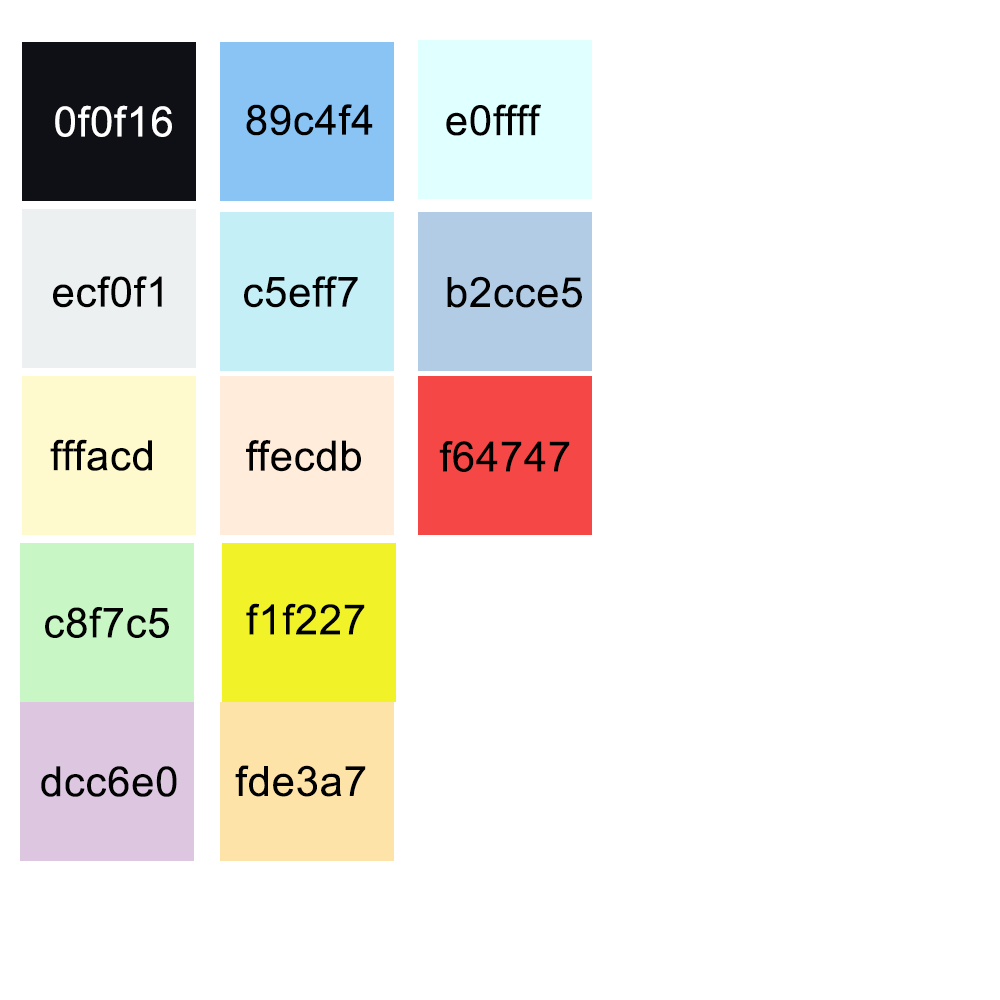
<style>
.page{position:relative;width:1000px;height:1000px;background:#ffffff}
.page>*{position:absolute;margin:0}
.t1{font:41.7px "ArialMT";letter-spacing:0.02em;color:#ffffff}
.t2{font:41.7px "ArialMT";letter-spacing:0.02em;color:#000000}
.t3{font:41.7px "ArialMT";letter-spacing:0.02em;color:#010101}
</style>
<div class="page">
<p class="t1" style="left:55px;top:105px;width:117px;height:32px">0f0f16</p>
<p class="t2" style="left:246px;top:104px;width:127px;height:32px">89c4f4</p>
<p class="t2" style="left:446px;top:104px;width:95px;height:32px">e0ffff</p>
<p class="t2" style="left:53px;top:276px;width:109px;height:32px">ecf0f1</p>
<p class="t2" style="left:244px;top:276px;width:114px;height:32px">c5eff7</p>
<p class="t2" style="left:447px;top:276px;width:135px;height:32px">b2cce5</p>
<p class="t2" style="left:50px;top:439px;width:102px;height:32px">fffacd</p>
<p class="t2" style="left:246px;top:440px;width:115px;height:32px">ffecdb</p>
<p class="t2" style="left:439px;top:441px;width:131px;height:31px">f64747</p>
<p class="t2" style="left:246px;top:603px;width:119px;height:32px">f1f227</p>
<p class="t3" style="left:45px;top:607px;width:124px;height:31px">c8f7c5</p>
<p class="t2" style="left:41px;top:766px;width:136px;height:31px">dcc6e0</p>
<p class="t2" style="left:235px;top:765px;width:131px;height:32px">fde3a7</p>
</div>
